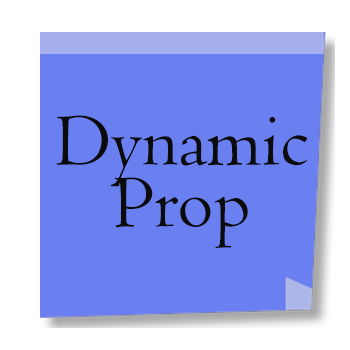
<style>
.page{position:relative;width:350px;height:350px;background:#6a80f1}
.page>*{position:absolute;margin:0}
.t1{font:76.9px/61.7px "Centaur";color:#0b0b0b}
</style>
<div class="page">
<p class="t1" style="left:56px;top:115px;width:252px;height:133px;text-align:center">Dynamic<br>Prop</p>
</div>
